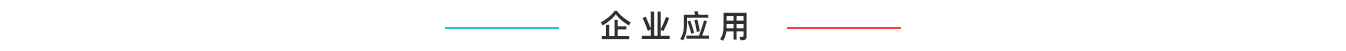
<style>
.page{position:relative;width:1346px;height:51px;background:#ffffff}
.page>*{position:absolute;margin:0}
.t1{font:32px "AlibabaPuHuiTi-Medium";color:#303030}
</style>
<div class="page">
<p class="t1" style="left:600px;top:10px;width:147px;height:31px">企 业 应 用</p>
</div>
